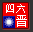
<style>
.page{position:relative;width:33px;height:32px;background:#f20000}
.page>*{position:absolute;margin:0}
.t1{font:10.4px "SimSun";color:#ffffff}
.t2{font:11.7px "SimSun";color:#ffffff}
</style>
<div class="page">
<p class="t1" style="left:6px;top:4px;width:19px;height:9px">四六</p>
<p class="t2" style="left:16px;top:15px;width:11px;height:12px">晋</p>
</div>
